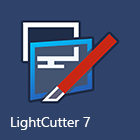
<style>
.page{position:relative;width:140px;height:140px;background:#2e426a}
.page>*{position:absolute;margin:0}
.t1{font:14px "YuGothicUI-Regular";color:#ffffff}
</style>
<div class="page">
<p class="t1" style="left:11px;top:117px;width:79px;height:13px">LightCutter 7</p>
</div>
